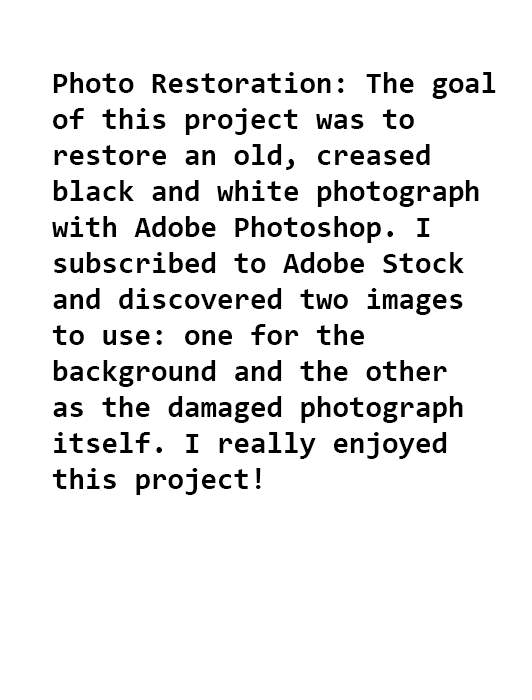
<style>
.page{position:relative;width:532px;height:700px;background:#ffffff}
.page>*{position:absolute;margin:0}
.t1{font:30px "Consolas-Bold";color:#000000}
</style>
<div class="page">
<p class="t1" style="left:52px;top:72px;width:444px;height:423px">Photo Restoration: The goal<br>of this project was to <br>restore an old, creased <br>black and white photograph <br>with Adobe Photoshop. I <br>subscribed to Adobe Stock <br>and discovered two images <br>to use: one for the <br>background and the other <br>as the damaged photograph <br>itself. I really enjoyed <br>this project!</p>
</div>
